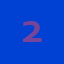
<style>
.page{position:relative;width:64px;height:64px;background:#0041d3}
.page>*{position:absolute;margin:0}
.t1{font:45.3px "Corbel-Bold";color:#75449b}
</style>
<div class="page">
<p class="t1" style="left:23px;top:21px;width:19px;height:21px">2</p>
</div>
